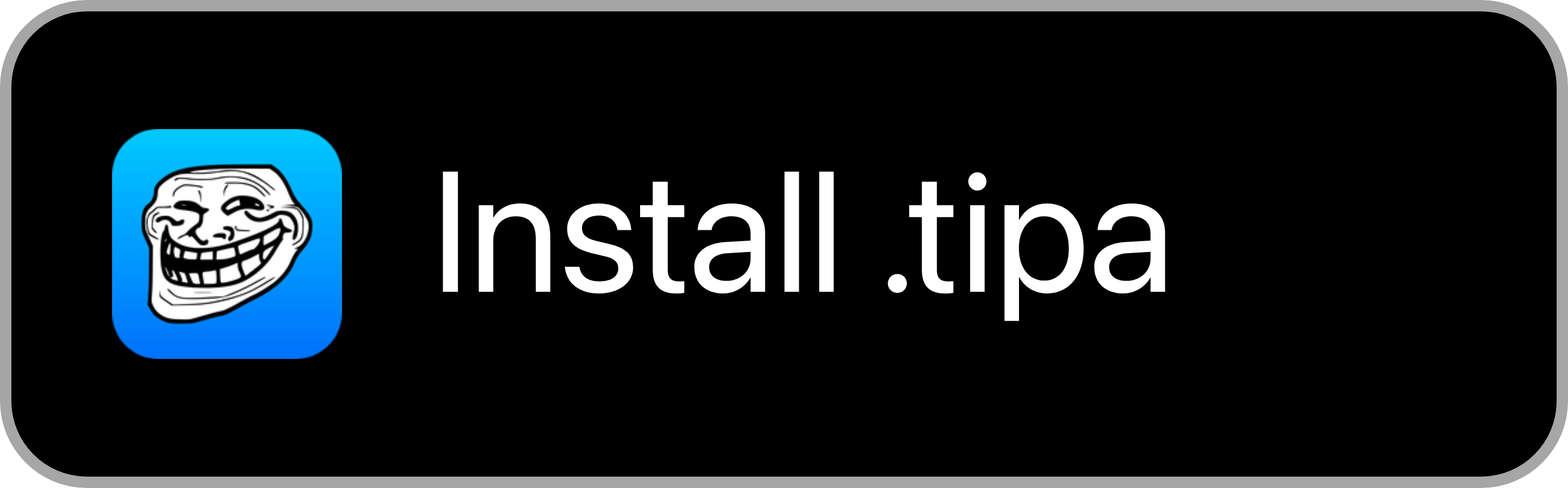
<style>
.page{position:relative;width:1568px;height:488px;background:#000000}
.page>*{position:absolute;margin:0}
.t1{font:170.7px "SFProDisplay-Regular";color:#ffffff}
</style>
<div class="page">
<p class="t1" style="left:443px;top:171px;width:722px;height:150px">Install .tipa</p>
</div>
